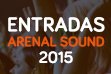
<style>
.page{position:relative;width:111px;height:74px}
.page>*{position:absolute;margin:0}
.t1{font:14.3px/14.8px "Bariol-Bold";color:#e9560d}
.t2{font:20.9px/19.5px "Bariol-Bold";color:#ffffff}
.t3{font:16.6px/16.5px "Bariol-Bold";color:#ffffff}
</style>
<div class="page">
<p class="t1" style="left:7px;top:17px;width:98px;height:47px;text-align:center"><span class="t2">ENTRADAS<br></span>ARENAL SOUND<br><span class="t3">2015</span></p>
</div>
